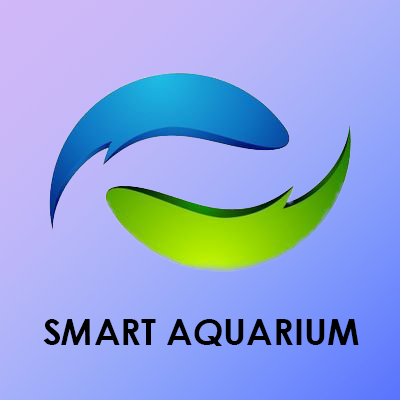
<style>
.page{position:relative;width:400px;height:400px}
.page>*{position:absolute;margin:0}
.t1{font:36px "CenturyGothic-Bold";color:#000000}
.t2{font:36px "CenturyGothic-BoldItalic";color:#000000}
</style>
<div class="page">
<p class="t1" style="left:43px;top:319px;width:316px;height:27px">S<span class="t2">M</span>ART A<span class="t2">Q</span>UARIUM</p>
</div>
